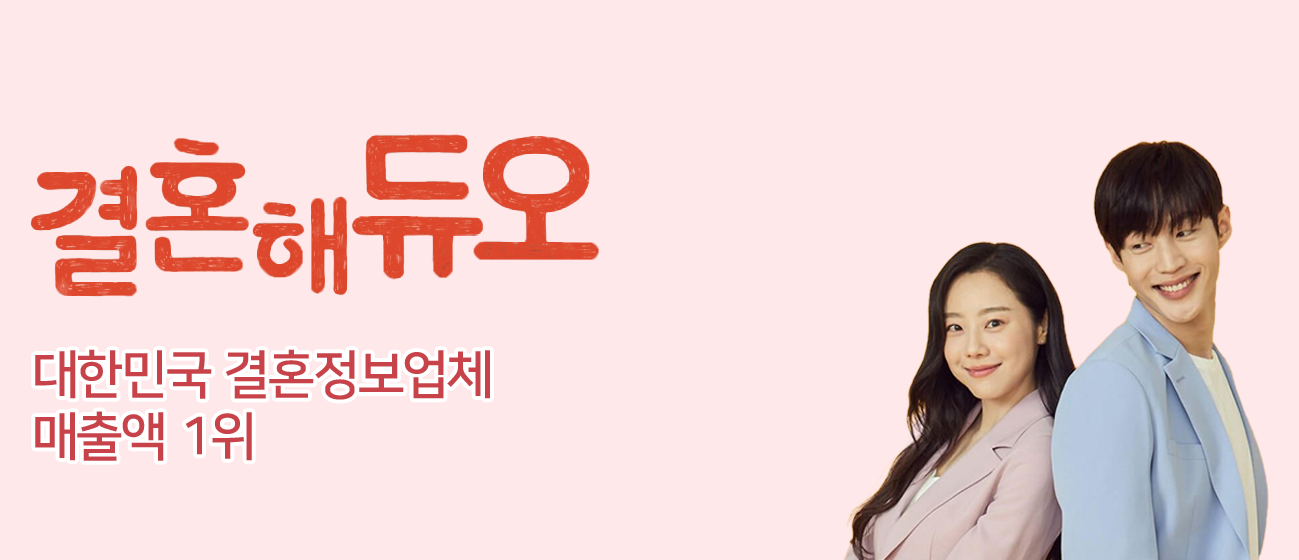
<style>
.page{position:relative;width:1299px;height:560px;background:#ffe8e9}
.page>*{position:absolute;margin:0}
.t1{font:52px "NanumSquareOTF_acB";color:#c74349}
</style>
<div class="page">
<p class="t1" style="left:35px;top:349px;width:455px;height:112px">대한민국 결혼정보업체<br>매출액 1위</p>
</div>
